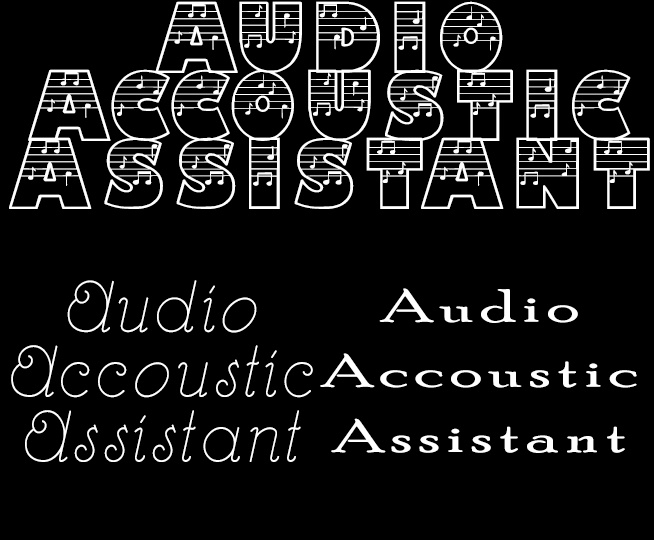
<style>
.page{position:relative;width:654px;height:540px;background:#000000}
.page>*{position:absolute;margin:0}
.t1{font:71.1px/67.9px "DTNoted";letter-spacing:0.08em;color:#ffffff;scale:1.17 1}
.t2{font:67.9px/64.9px "RhumbaScriptNF";letter-spacing:0.08em;color:#ffffff;scale:0.89 1}
.t3{font:46.8px/65.1px "PoorRichard-Regular";letter-spacing:0.08em;color:#ffffff;scale:1.56 1}
</style>
<div class="page">
<p class="t1" style="left:9px;top:1px;width:641px;height:208px;text-align:center">Audio<br>Accoustic<br>Assistant</p>
<p class="t2" style="left:11px;top:280px;width:302px;height:182px;text-align:center">Audio<br>Accoustic<br>Assistant</p>
<p class="t3" style="left:320px;top:288px;width:317px;height:165px;text-align:center">Audio<br>Accoustic<br>Assistant</p>
</div>
